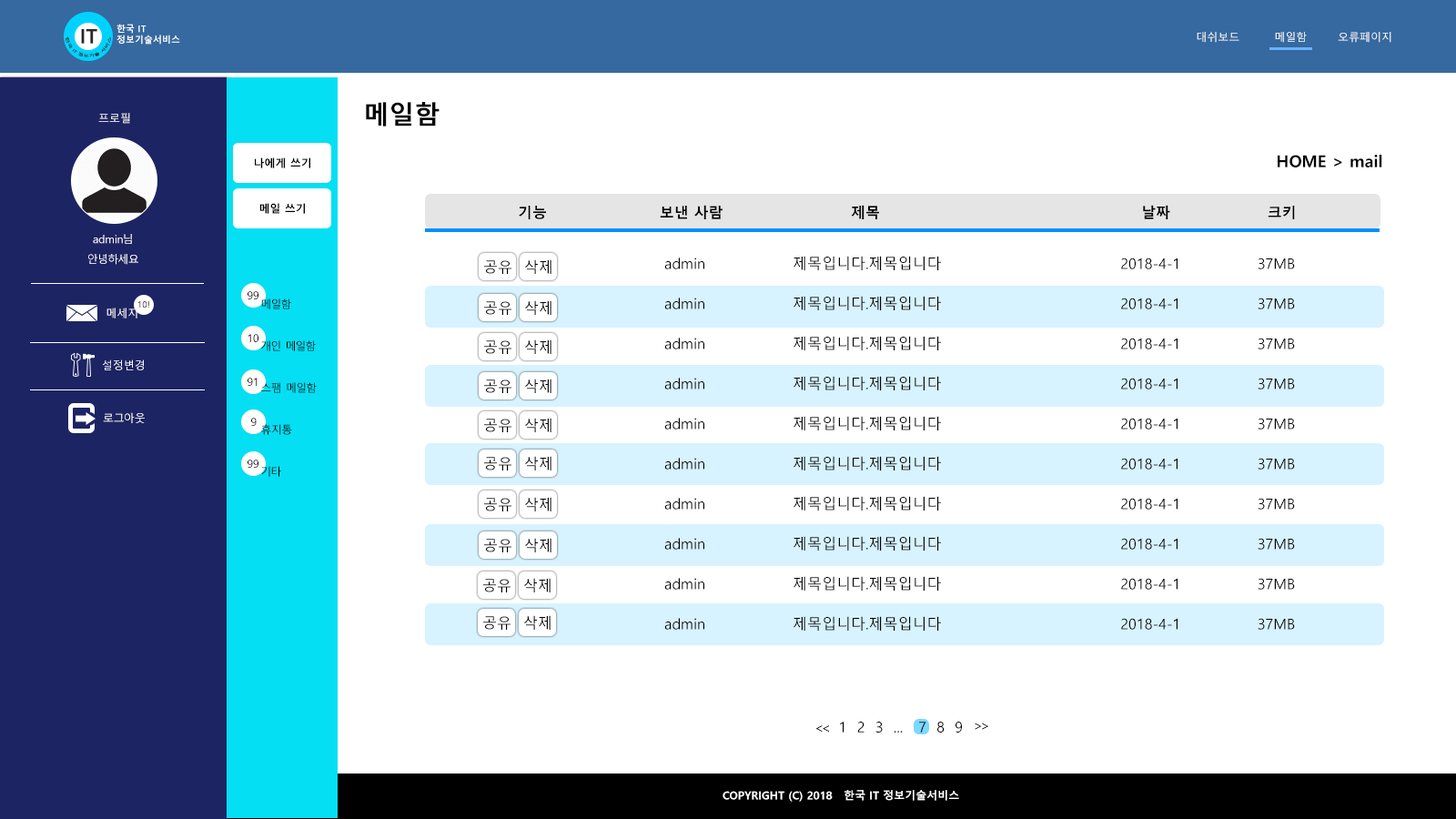
<style>
.page{position:relative;width:1456px;height:819px;background:#ffffff}
.page>*{position:absolute;margin:0}
.t1{font:20px "MalgunGothicBold";color:#282828}
.t2{font:9.1px "MalgunGothicBold";color:#ffffff}
.t3{font:3.6px "MalgunGothic";color:#282828}
.t4{font:10.9px "MalgunGothic";color:#ffffff}
.t5{font:25.5px "MalgunGothicBold";color:#000000}
.t6{font:10.9px "MalgunGothicBold";color:#000000}
.t7{font:16.4px "MalgunGothicBold";color:#000000}
.t8{font:14.6px "MalgunGothicBold";color:#000000}
.t9{font:10.9px/20px "MalgunGothic";color:#ffffff}
.t10{font:14.6px/40px "MalgunGothic";color:#000000}
.t11{font:14.6px "MalgunGothic";color:#000000}
.t12{font:10.9px "MalgunGothic";color:#000000}
.t13{font:9.1px "MalgunGothic"}
.t14{font:10.9px/41.9px "MalgunGothic";color:#000000}
.t15{font:14.6px "MalgunGothic";letter-spacing:-0.22em;color:#000000}
.t16{font:14.6px "MalgunGothic";letter-spacing:-0.22em}
.t17{font:10.9px "MalgunGothicBold";color:#ffffff}
</style>
<div class="page">
<p class="t1" style="left:81px;top:29px;width:16px;height:15px">IT</p>
<p class="t2" style="left:116px;top:24px;width:64px;height:21px">한국 IT<br>정보기술서비스</p>
<p class="t3" style="left:65px;top:36px;width:47px;height:21px;text-align:center">한국 IT 정보기술 서비스</p>
<p class="t4" style="left:1197px;top:32px;width:194px;height:11px">대쉬보드         메일함        오류페이지</p>
<p class="t5" style="left:366px;top:102px;width:74px;height:24px">메일함</p>
<p class="t4" style="left:98px;top:113px;width:32px;height:11px">프로필</p>
<p class="t6" style="left:255px;top:157px;width:55px;height:11px">나에게 쓰기</p>
<p class="t7" style="left:1278px;top:155px;width:104px;height:12px">HOME &gt; mail</p>
<p class="t6" style="left:259px;top:203px;width:46px;height:11px">메일 쓰기</p>
<p class="t8" style="left:519px;top:205px;width:776px;height:14px">기능                      보낸 사람                         제목                                                   날짜                   크키</p>
<p class="t9" style="left:88px;top:234px;width:50px;height:31px;text-align:center">admin님<br>안녕하세요</p>
<p class="t10" style="left:664px;top:256px;width:631px;height:375px">admin                 제목입니다.제목입니다                                   2018-4-1               37MB<br>admin                 제목입니다.제목입니다                                   2018-4-1               37MB<br>admin                 제목입니다.제목입니다                                   2018-4-1               37MB<br>admin                 제목입니다.제목입니다                                   2018-4-1               37MB<br>admin                 제목입니다.제목입니다                                   2018-4-1               37MB<br>admin                 제목입니다.제목입니다                                   2018-4-1               37MB<br>admin                 제목입니다.제목입니다                                   2018-4-1               37MB<br>admin                 제목입니다.제목입니다                                   2018-4-1               37MB<br>admin                 제목입니다.제목입니다                                   2018-4-1               37MB<br>admin                 제목입니다.제목입니다                                   2018-4-1               37MB</p>
<p class="t11" style="left:484px;top:260px;width:27px;height:14px">공유</p>
<p class="t11" style="left:525px;top:259px;width:26px;height:15px">삭제</p>
<p class="t12" style="left:248px;top:291px;width:10px;height:8px">99</p>
<p class="t13" style="left:137px;top:301px;width:12px;height:7px">10!</p>
<p class="t14" style="left:261px;top:298px;width:56px;height:179px">메일함<br>개인 메일함<br>스팸 메일함<br>휴지통<br>기타</p>
<p class="t11" style="left:484px;top:301px;width:27px;height:14px">공유</p>
<p class="t11" style="left:525px;top:300px;width:26px;height:15px">삭제</p>
<p class="t4" style="left:106px;top:308px;width:31px;height:10px">메세지</p>
<p class="t12" style="left:248px;top:334px;width:10px;height:8px">10</p>
<p class="t11" style="left:484px;top:340px;width:27px;height:14px">공유</p>
<p class="t11" style="left:525px;top:339px;width:26px;height:15px">삭제</p>
<p class="t4" style="left:102px;top:359px;width:42px;height:11px">설정변경</p>
<p class="t12" style="left:248px;top:378px;width:10px;height:8px">91</p>
<p class="t11" style="left:484px;top:379px;width:27px;height:14px">공유</p>
<p class="t11" style="left:525px;top:379px;width:26px;height:14px">삭제</p>
<p class="t4" style="left:103px;top:412px;width:42px;height:11px">로그아웃</p>
<p class="t12" style="left:251px;top:418px;width:6px;height:8px">9</p>
<p class="t11" style="left:484px;top:419px;width:27px;height:13px">공유</p>
<p class="t11" style="left:525px;top:418px;width:26px;height:14px">삭제</p>
<p class="t12" style="left:248px;top:460px;width:10px;height:8px">99</p>
<p class="t11" style="left:484px;top:457px;width:27px;height:13px">공유</p>
<p class="t11" style="left:525px;top:456px;width:26px;height:14px">삭제</p>
<p class="t11" style="left:484px;top:498px;width:27px;height:13px">공유</p>
<p class="t11" style="left:525px;top:497px;width:26px;height:14px">삭제</p>
<p class="t11" style="left:484px;top:539px;width:27px;height:13px">공유</p>
<p class="t11" style="left:525px;top:538px;width:26px;height:14px">삭제</p>
<p class="t11" style="left:483px;top:579px;width:28px;height:13px">공유</p>
<p class="t11" style="left:524px;top:578px;width:27px;height:14px">삭제</p>
<p class="t11" style="left:483px;top:616px;width:28px;height:14px">공유</p>
<p class="t11" style="left:524px;top:615px;width:27px;height:15px">삭제</p>
<p class="t15" style="left:815px;top:725px;width:14px;height:8px">&lt;&lt;</p>
<p class="t11" style="left:840px;top:722px;width:122px;height:11px">1  2  3  ...   7  8  9</p>
<p class="t16" style="left:975px;top:723px;width:13px;height:7px">&gt;&gt;</p>
<p class="t17" style="left:723px;top:790px;width:236px;height:12px">COPYRIGHT (C) 2018   한국 IT 정보기술서비스</p>
<p class="t17" style="left:723px;top:790px;width:236px;height:12px">COPYRIGHT (C) 2018   한국 IT 정보기술서비스</p>
</div>
